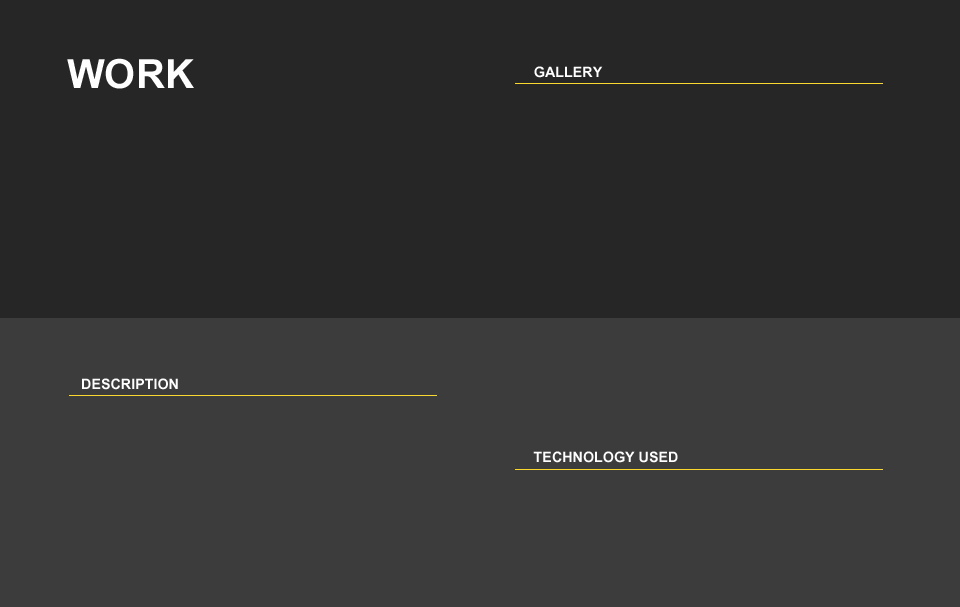
<style>
.page{position:relative;width:960px;height:607px;background:#262626}
.page>*{position:absolute;margin:0}
.t1{font:56px "Utsaah-Bold";color:#fefefe}
.t2{font:20px "Utsaah-Bold";color:#fefefe}
</style>
<div class="page">
<p class="t1" style="left:67px;top:58px;width:127px;height:31px">WORK</p>
<p class="t2" style="left:534px;top:66px;width:69px;height:12px">GALLERY</p>
<p class="t2" style="left:82px;top:378px;width:96px;height:12px">DESCRIPTION</p>
<p class="t2" style="left:533px;top:451px;width:145px;height:12px">TECHNOLOGY USED</p>
</div>
